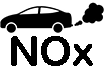
<style>
.page{position:relative;width:104px;height:69px;background:#ffffff}
.page>*{position:absolute;margin:0}
.t1{font:41.7px "ArialRoundedMTBold";color:#000000}
</style>
<div class="page">
<p class="t1" style="left:11px;top:36px;width:82px;height:30px">NOx</p>
</div>
